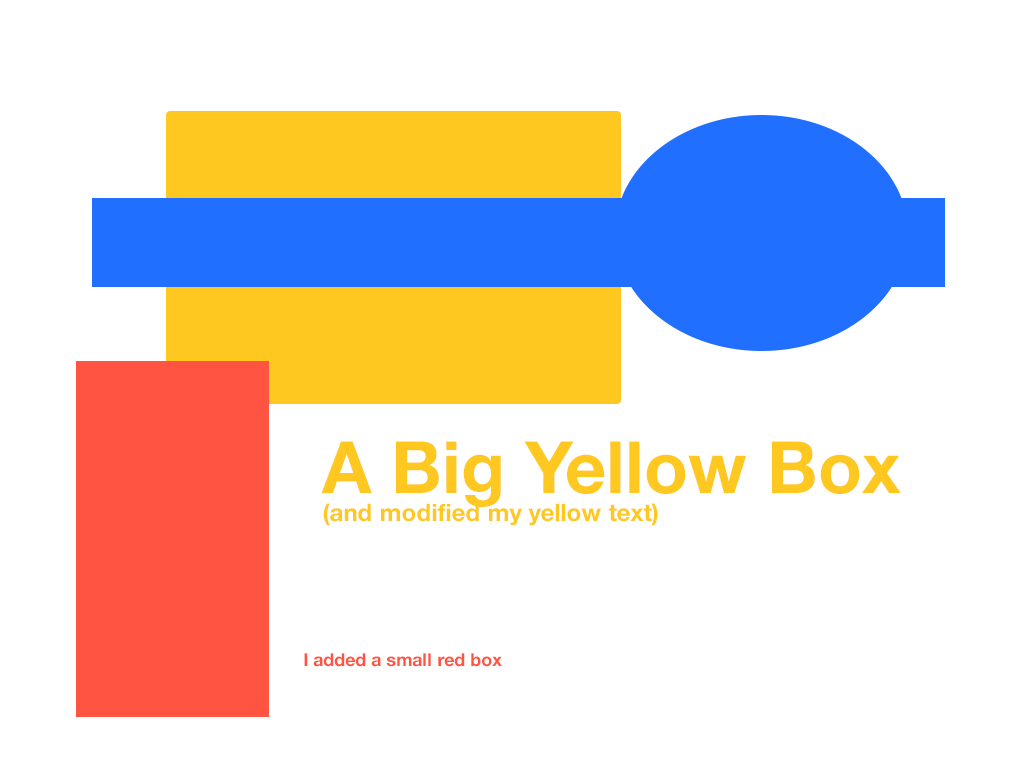
<style>
.page{position:relative;width:1024px;height:768px;background:#ffffff}
.page>*{position:absolute;margin:0}
.t1{font:24px "HelveticaNeue-Bold";color:#ffc820}
.t2{font:72px "HelveticaNeue-Bold";color:#ffc820}
.t3{font:18px "HelveticaNeue-Bold";color:#ff5441}
</style>
<div class="page">
<p class="t1" style="left:321px;top:441px;width:580px;height:85px"><span class="t2">A Big Yellow Box<br></span>(and modified my yellow text)</p>
<p class="t3" style="left:304px;top:653px;width:198px;height:14px">I added a small red box</p>
</div>
